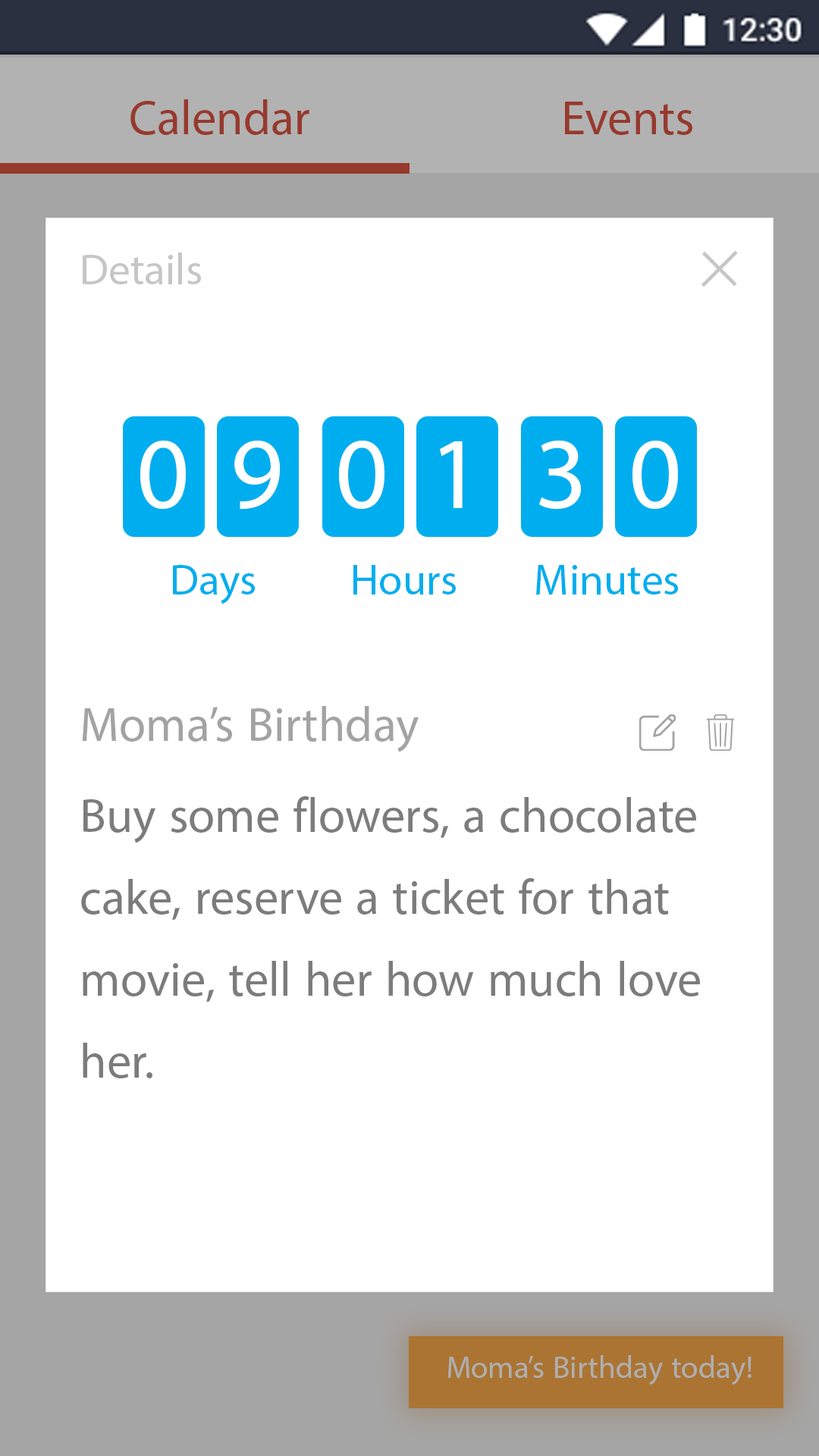
<style>
.page{position:relative;width:819px;height:1456px;background:#ffffff}
.page>*{position:absolute;margin:0}
.t1{font:68.2px "MyriadArabic-Regular";color:#97392d}
.t2{font:60.7px "MyriadArabic-Regular";color:#c6c6c6}
.t3{font:111.5px "BaskOldFace";color:#c6c6c6}
.t4{font:144px "MyriadArabic-Regular";color:#ffffff}
.t5{font:60.7px "MyriadArabic-Regular";color:#00aeef}
.t6{font:68.2px "MyriadArabic-Regular";color:#a3a3a3}
.t7{font:68.2px "MyriadArabic-Regular";color:#7c7c7c}
.t8{font:43.8px "MyriadArabic-Regular";color:#afafaf}
</style>
<div class="page">
<p class="t1" style="left:130px;top:99px;width:179px;height:36px">Calendar</p>
<p class="t1" style="left:565px;top:102px;width:127px;height:33px">Events</p>
<p class="t2" style="left:83px;top:253px;width:118px;height:31px">Details</p>
<p class="t3" style="left:701px;top:250px;width:37px;height:37px;rotate:-45deg">+</p>
<p class="t4" style="left:140px;top:441px;width:46px;height:68px">0</p>
<p class="t4" style="left:234px;top:441px;width:46px;height:69px">9</p>
<p class="t4" style="left:339px;top:441px;width:45px;height:68px">0</p>
<p class="t4" style="left:440px;top:441px;width:23px;height:67px">1</p>
<p class="t4" style="left:539px;top:440px;width:42px;height:70px">3</p>
<p class="t4" style="left:632px;top:441px;width:46px;height:68px">0</p>
<p class="t5" style="left:173px;top:565px;width:82px;height:39px">Days</p>
<p class="t5" style="left:353px;top:565px;width:103px;height:30px">Hours</p>
<p class="t5" style="left:536px;top:565px;width:142px;height:30px">Minutes</p>
<p class="t6" style="left:82px;top:706px;width:337px;height:46px">Moma’s Birthday</p>
<p class="t7" style="left:81px;top:796px;width:619px;height:282px;text-align:justify">Buy some flowers, a chocolate<br>cake, reserve a ticket for that<br>movie, tell her how much love<br>her.</p>
<p class="t8" style="left:447px;top:1355px;width:304px;height:30px">Moma’s Birthday today!</p>
</div>
